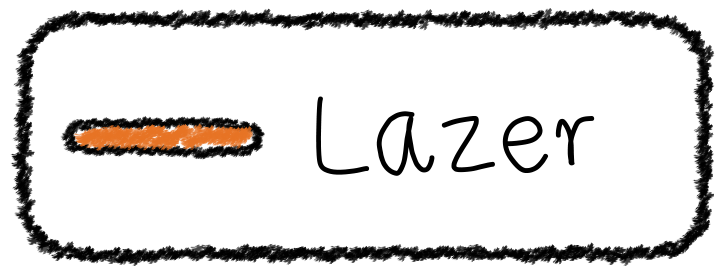
<style>
.page{position:relative;width:725px;height:274px;background:#ffffff}
.page>*{position:absolute;margin:0}
.t1{font:120px "RiseStarHand";color:#000000}
</style>
<div class="page">
<p class="t1" style="left:316px;top:96px;width:279px;height:80px">Lazer</p>
</div>
